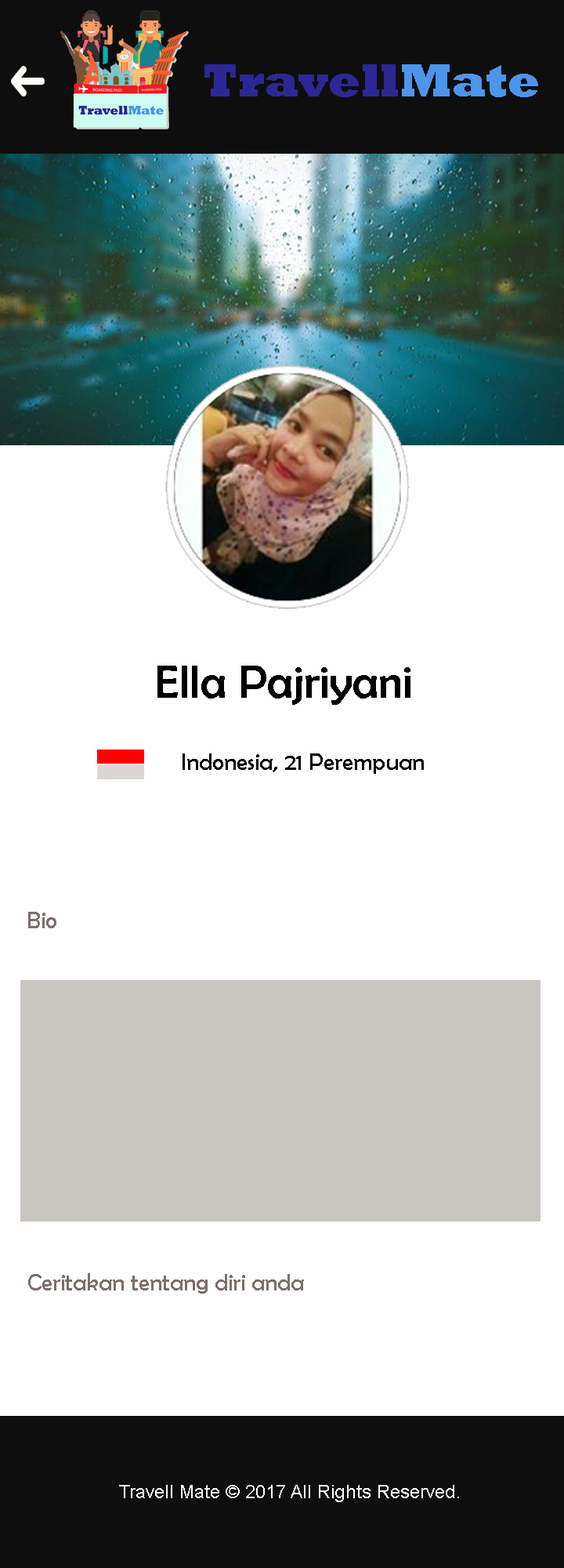
<style>
.page{position:relative;width:564px;height:1568px;background:#ffffff}
.page>*{position:absolute;margin:0}
.t1{font:47px "Rockwell-ExtraBold";color:#2b2896}
.t2{font:47px "Rockwell-ExtraBold";color:#4d94eb}
.t3{font:47px "BerlinSansFB-Reg";color:#000000}
.t4{font:23.5px "BerlinSansFB-Reg";color:#000000}
.t5{font:23.5px "BerlinSansFB-Reg";color:#7c6e6e}
.t6{font:18.8px "ArialMT";color:#ffffff}
</style>
<div class="page">
<p class="t1" style="left:205px;top:64px;width:334px;height:33px">Travell<span class="t2">Mate</span></p>
<p class="t3" style="left:158px;top:666px;width:253px;height:39px">Ella Pajriyani</p>
<p class="t4" style="left:183px;top:753px;width:241px;height:21px">Indonesia, 21 Perempuan</p>
<p class="t5" style="left:28px;top:912px;width:28px;height:16px">Bio</p>
<p class="t5" style="left:28px;top:1273px;width:276px;height:21px">Ceritakan tentang diri anda</p>
<p class="t6" style="left:119px;top:1485px;width:340px;height:17px">Travell Mate © 2017 All Rights Reserved.</p>
</div>
